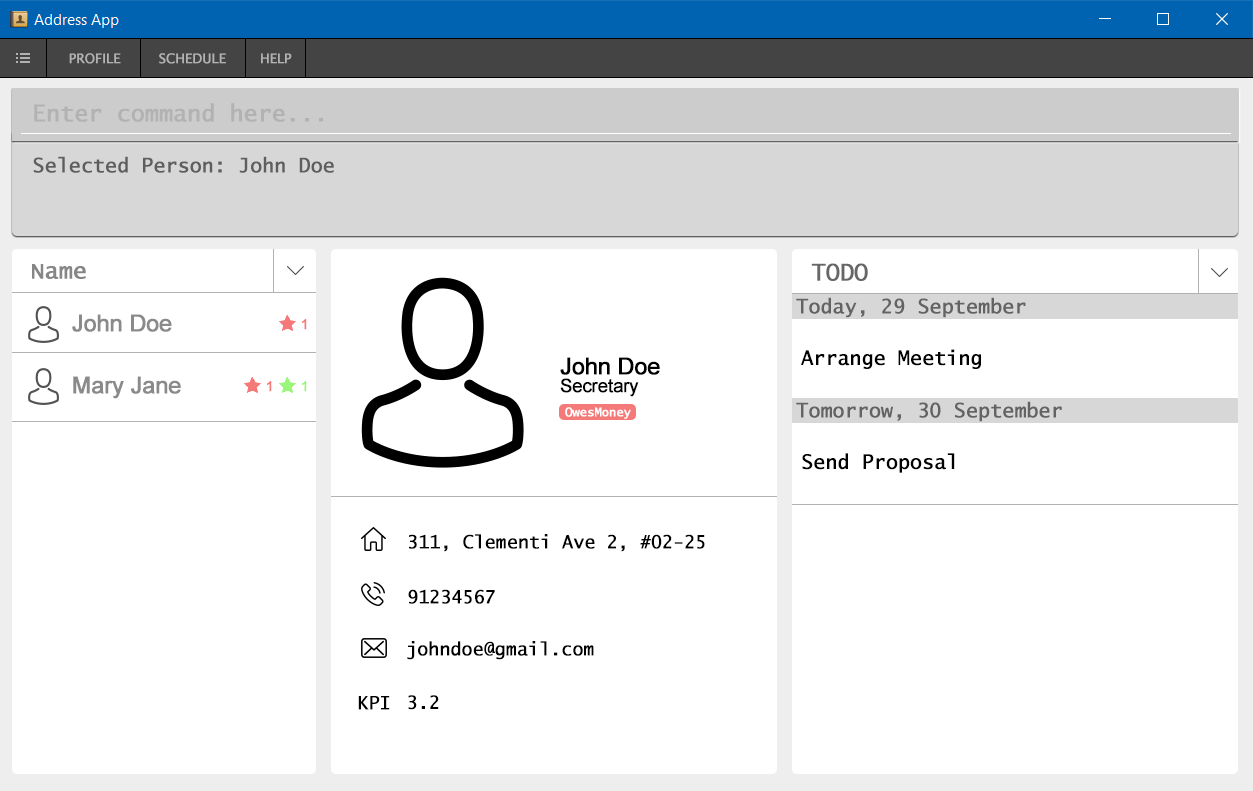
<style>
.page{position:relative;width:1253px;height:791px;background:#ffffff}
.page>*{position:absolute;margin:0}
.t1{font:13.3px "LucidaSans";letter-spacing:-0.025em;color:#b2b2b2;font-weight:bold}
.t2{font:23.3px "LucidaSans-Typewriter";letter-spacing:-0.025em;color:#b2b2b2;font-weight:bold}
.t3{font:12px "LucidaSans-Typewriter";letter-spacing:-0.025em;color:#5e5e5e;font-weight:bold}
.t4{font:23.3px "LucidaConsole";letter-spacing:-0.025em;color:#878686;font-weight:bold}
.t5{font:23.3px "LucidaSans-Typewriter";letter-spacing:-0.025em;color:#676767;font-weight:bold}
.t6{font:20px "LucidaSans-Typewriter";letter-spacing:-0.025em;color:#636363;font-weight:bold}
.t7{font:23.3px "ArialMT";letter-spacing:-0.025em;color:#8a8a8a;font-weight:bold}
.t8{font:14.4px "ArialMT";letter-spacing:-0.025em;color:#f67979;font-weight:bold}
.t9{font:12px "LucidaSans-Typewriter";letter-spacing:-0.025em;color:#000000;font-weight:bold}
.t10{font:18.3px/29.5px "ArialMT";letter-spacing:-0.025em;color:#000000;font-weight:bold}
.t11{font:23.3px/29.5px "ArialMT";letter-spacing:-0.025em;color:#000000;font-weight:bold}
.t12{font:14.4px "ArialMT";letter-spacing:-0.025em;color:#99f679;font-weight:bold}
.t13{font:12.1px "LucidaSans-Typewriter";letter-spacing:-0.025em;color:#ffffff;font-weight:bold}
.t14{font:18.3px "LucidaSans-Typewriter";letter-spacing:-0.025em;color:#000000;font-weight:bold}
</style>
<div class="page">
<p class="t1" style="left:69px;top:53px;width:223px;height:11px">PROFILE         SCHEDULE        HELP</p>
<p class="t2" style="left:34px;top:103px;width:289px;height:19px">Enter command here...</p>
<p class="t3" style="left:33px;top:156px;width:301px;height:17px">Selected Person: John Doe</p>
<p class="t4" style="left:32px;top:264px;width:54px;height:15px">Name</p>
<p class="t5" style="left:811px;top:263px;width:57px;height:18px">TODO</p>
<p class="t6" style="left:796px;top:297px;width:230px;height:21px">Today, 29 September</p>
<p class="t7" style="left:72px;top:314px;width:100px;height:18px">John Doe</p>
<p class="t8" style="left:302px;top:319px;width:5px;height:11px">1</p>
<p class="t9" style="left:801px;top:349px;width:180px;height:20px">Arrange Meeting</p>
<p class="t10" style="left:560px;top:357px;width:100px;height:40px"><span class="t11">John Doe<br></span>Secretary</p>
<p class="t7" style="left:73px;top:376px;width:108px;height:23px">Mary Jane</p>
<p class="t8" style="left:267px;top:381px;width:5px;height:11px">1</p>
<p class="t12" style="left:302px;top:381px;width:5px;height:11px">1</p>
<p class="t6" style="left:796px;top:401px;width:266px;height:21px">Tomorrow, 30 September</p>
<p class="t13" style="left:565px;top:407px;width:66px;height:12px">OwesMoney</p>
<p class="t9" style="left:802px;top:453px;width:153px;height:20px">Send Proposal</p>
<p class="t14" style="left:409px;top:534px;width:296px;height:18px">311, Clementi Ave 2, #02-25</p>
<p class="t14" style="left:408px;top:589px;width:87px;height:15px">91234567</p>
<p class="t14" style="left:407px;top:641px;width:187px;height:19px">johndoe@gmail.com</p>
<p class="t14" style="left:358px;top:696px;width:32px;height:14px">KPI</p>
<p class="t14" style="left:408px;top:695px;width:31px;height:15px">3.2</p>
</div>
